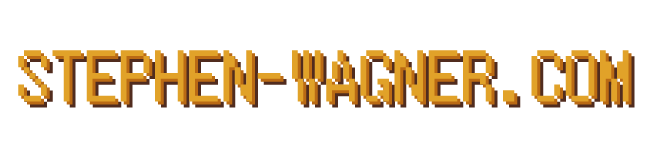
<style>
.page{position:relative;width:658px;height:157px;background:#ffffff}
.page>*{position:absolute;margin:0}
.t1{font:73px "Terminal";color:#e1a229}
.t2{font:73px "Terminal"}
</style>
<div class="page">
<p class="t1" style="left:18px;top:50px;width:611px;height:52px">STEPHEN-WAGNER.COM</p>
<p class="t2" style="left:21px;top:53px;width:611px;height:52px">STEPHEN-WAGNER.COM</p>
<p class="t2" style="left:24px;top:56px;width:611px;height:52px">STEPHEN-WAGNER.COM</p>
</div>
